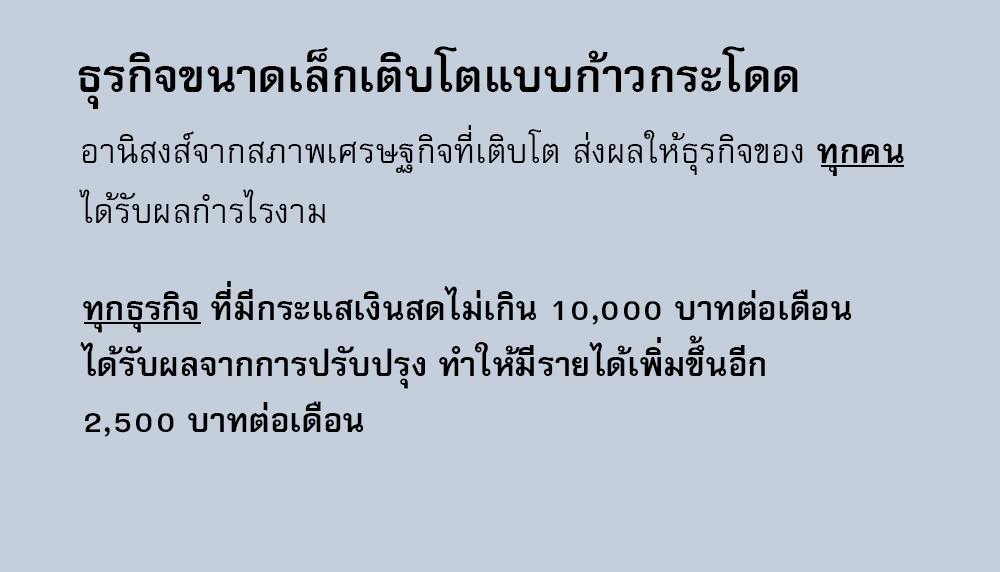
<style>
.page{position:relative;width:1000px;height:572px;background:#c5cedb}
.page>*{position:absolute;margin:0}
.t1{font:64px "FreesiaUPCBold";color:#000000}
.t2{font:48px/60px "FreesiaUPC";color:#000000}
.t3{font:48px/60px "FreesiaUPCBold";color:#000000}
.t4{font:47px "FreesiaUPCBold";color:#000000}
</style>
<div class="page">
<p class="t1" style="left:78px;top:46px;width:720px;height:63px">ธุรกิจขนาดเล็กเติบโตแบบก้าวกระโดด</p>
<p class="t2" style="left:79px;top:125px;width:825px;height:98px">อานิสงส์จากสภาพเศรษฐกิจที่เติบโต ส่งผลให้ธุรกิจของ <span class="t3">ทุกคน<br></span>ได้รับผลกำรไรงาม</p>
<p class="t4" style="left:80px;top:281px;width:772px;height:156px">ทุกธุรกิจ ที่มีกระแสเงินสดไม่เกิน 10,000 บาทต่อเดือน<br>ได้รับผลจากการปรับปรุง ทำให้มีรายได้เพิ่มขึ้นอีก<br>2,500 บาทต่อเดือน</p>
</div>
